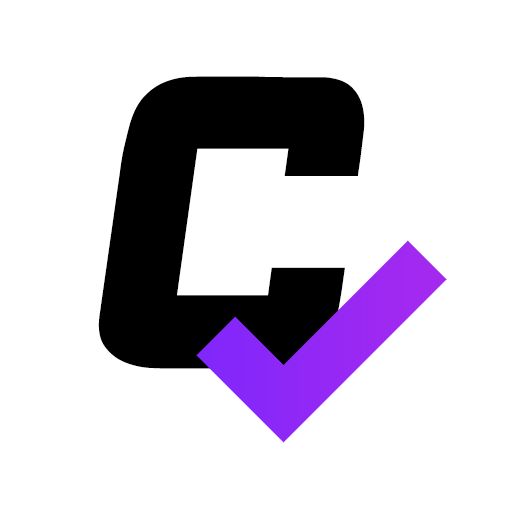
<style>
.page{position:relative;width:512px;height:512px;background:#ffffff}
.page>*{position:absolute;margin:0}
.t1{font:416.7px "Closeness-BoldItalic";letter-spacing:0.01em;color:#000000}
</style>
<div class="page">
<p class="t1" style="left:98px;top:76px;width:267px;height:293px">C</p>
</div>
